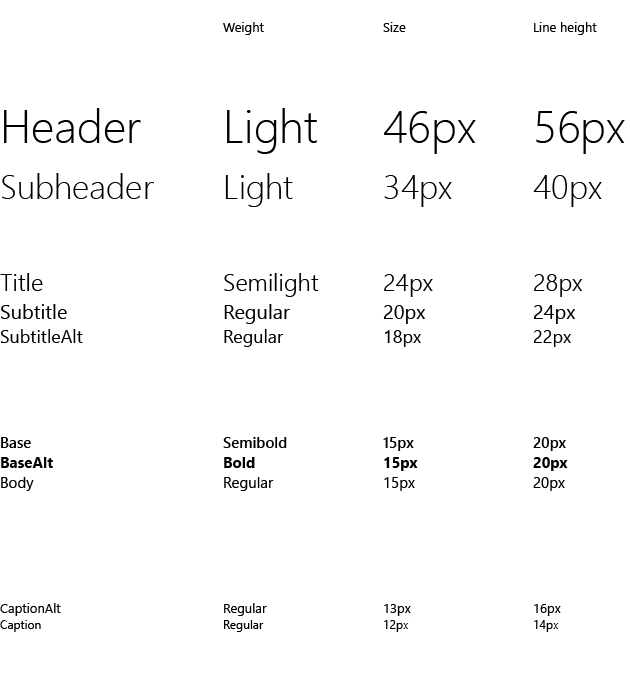
<style>
.page{position:relative;width:630px;height:700px;background:#ffffff}
.page>*{position:absolute;margin:0}
.t1{font:13px "SegoeUI";color:#000000}
.t2{font:46px "SegoeUI-Light";color:#000000}
.t3{font:34px "SegoeUI-Light";color:#000000}
.t4{font:24px "SegoeUI-Semilight";color:#000000}
.t5{font:20px "SegoeUI";color:#000000}
.t6{font:18px "SegoeUI";color:#000000}
.t7{font:15px "SegoeUI-Semibold";color:#000000}
.t8{font:15px "SegoeUI-Bold";color:#000000}
.t9{font:15px "SegoeUI";color:#000000}
.t10{font:12px "SegoeUI";color:#000000}
</style>
<div class="page">
<p class="t1" style="left:223px;top:22px;width:41px;height:13px">Weight</p>
<p class="t1" style="left:383px;top:22px;width:23px;height:10px">Size</p>
<p class="t1" style="left:534px;top:22px;width:63px;height:13px">Line height</p>
<p class="t2" style="left:4px;top:108px;width:137px;height:35px">Header</p>
<p class="t2" style="left:227px;top:108px;width:90px;height:46px">Light</p>
<p class="t2" style="left:384px;top:111px;width:92px;height:43px">46px</p>
<p class="t2" style="left:536px;top:111px;width:89px;height:43px">56px</p>
<p class="t3" style="left:2px;top:173px;width:152px;height:26px">Subheader</p>
<p class="t3" style="left:225px;top:173px;width:68px;height:34px">Light</p>
<p class="t3" style="left:384px;top:175px;width:68px;height:32px">34px</p>
<p class="t3" style="left:533px;top:175px;width:69px;height:32px">40px</p>
<p class="t4" style="left:0px;top:273px;width:43px;height:18px">Title</p>
<p class="t4" style="left:224px;top:273px;width:95px;height:24px">Semilight</p>
<p class="t4" style="left:384px;top:274px;width:49px;height:23px">24px</p>
<p class="t4" style="left:534px;top:274px;width:49px;height:23px">28px</p>
<p class="t5" style="left:1px;top:304px;width:66px;height:15px">Subtitle</p>
<p class="t5" style="left:224px;top:304px;width:66px;height:20px">Regular</p>
<p class="t5" style="left:383px;top:305px;width:42px;height:19px">20px</p>
<p class="t5" style="left:533px;top:305px;width:42px;height:19px">24px</p>
<p class="t6" style="left:0px;top:329px;width:83px;height:14px">SubtitleAlt</p>
<p class="t6" style="left:224px;top:329px;width:60px;height:18px">Regular</p>
<p class="t6" style="left:384px;top:330px;width:37px;height:17px">18px</p>
<p class="t6" style="left:533px;top:330px;width:38px;height:17px">22px</p>
<p class="t7" style="left:1px;top:437px;width:30px;height:11px">Base</p>
<p class="t7" style="left:223px;top:437px;width:64px;height:11px">Semibold</p>
<p class="t7" style="left:383px;top:437px;width:31px;height:14px">15px</p>
<p class="t7" style="left:533px;top:437px;width:33px;height:14px">20px</p>
<p class="t8" style="left:1px;top:457px;width:52px;height:11px">BaseAlt</p>
<p class="t8" style="left:224px;top:457px;width:31px;height:11px">Bold</p>
<p class="t8" style="left:384px;top:457px;width:34px;height:14px">15px</p>
<p class="t8" style="left:533px;top:457px;width:35px;height:14px">20px</p>
<p class="t9" style="left:1px;top:477px;width:33px;height:14px">Body</p>
<p class="t9" style="left:224px;top:477px;width:50px;height:14px">Regular</p>
<p class="t9" style="left:384px;top:477px;width:31px;height:14px">15px</p>
<p class="t9" style="left:533px;top:477px;width:32px;height:14px">20px</p>
<p class="t1" style="left:0px;top:603px;width:61px;height:13px">CaptionAlt</p>
<p class="t1" style="left:224px;top:603px;width:43px;height:13px">Regular</p>
<p class="t1" style="left:384px;top:604px;width:27px;height:12px">13px</p>
<p class="t1" style="left:534px;top:604px;width:27px;height:12px">16px</p>
<p class="t10" style="left:0px;top:620px;width:41px;height:12px">Caption</p>
<p class="t10" style="left:224px;top:620px;width:40px;height:12px">Regular</p>
<p class="t10" style="left:384px;top:620px;width:25px;height:12px">12px</p>
<p class="t10" style="left:534px;top:620px;width:25px;height:12px">14px</p>
</div>
